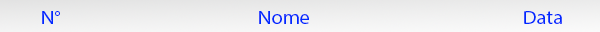
<style>
.page{position:relative;width:600px;height:32px}
.page>*{position:absolute;margin:0}
.t1{font:19.3px "MyriadPro-Regular";color:#002aff;scale:1.06 1}
</style>
<div class="page">
<p class="t1" style="left:42px;top:11px;width:18px;height:13px">N°</p>
<p class="t1" style="left:259px;top:11px;width:50px;height:13px">Nome</p>
<p class="t1" style="left:524px;top:11px;width:38px;height:13px">Data</p>
</div>
